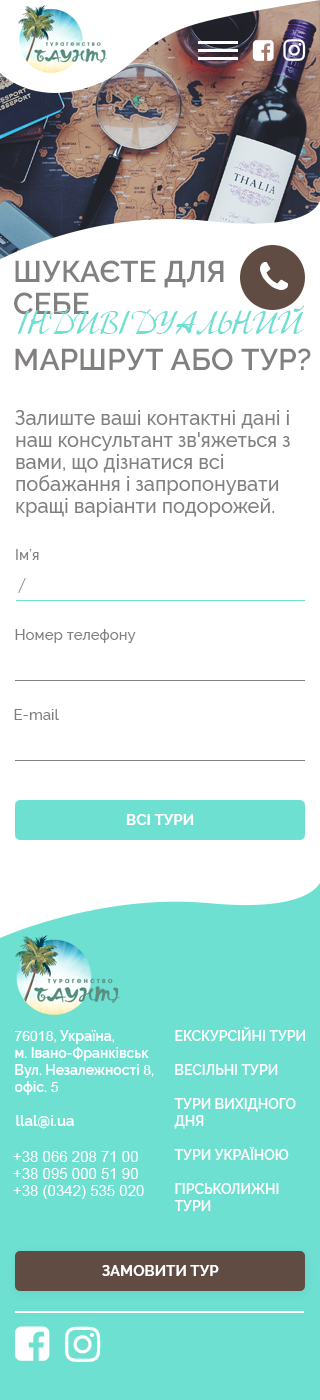
<style>
.page{position:relative;width:320px;height:1400px;background:#ffffff}
.page>*{position:absolute;margin:0}
.t1{font:30px/32px "Raleway-SemiBold";color:#82807f;text-transform:uppercase}
.t2{font:34px "Adventure";color:#6ee0d2;text-transform:uppercase}
.t3{font:30px "Raleway-SemiBold";color:#82807f;text-transform:uppercase}
.t4{font:20px/22px "Raleway-Medium";color:#82807f}
.t5{font:15px "Raleway-Medium";color:#82807f}
.t6{font:17px "Adventure";color:#82807f;text-transform:uppercase}
.t7{font:15px "Raleway-Bold";color:#ffffff}
.t8{font:14px/17px "Raleway-SemiBold";color:#ffffff}
.t9{font:14px/17px "ArialMT";color:#ffffff}
.t10{font:20px/22px "Raleway-Bold";color:#ffffff}
.t11{font:15px "Raleway-SemiBold";color:#ffffff}
.t12{font:15px/17px "ArialMT";color:#ffffff}
</style>
<div class="page">
<p class="t1" style="left:14px;top:260px;width:210px;height:55px">Шукаєте для <br>себе</p>
<p class="t2" style="left:17px;top:305px;width:288px;height:30px">iндивiдуальний</p>
<p class="t3" style="left:15px;top:348px;width:296px;height:23px">маршрут або тур?</p>
<p class="t4" style="left:15px;top:410px;width:275px;height:107px">Залиште ваші контактні дані і <br>наш консультант зв'яжеться з <br>вами, що дізнатися всі <br>побажання і запропонувати <br>кращі варіанти подорожей.</p>
<p class="t5" style="left:16px;top:549px;width:23px;height:11px">Ім’я</p>
<p class="t6" style="left:18px;top:578px;width:8px;height:15px">/</p>
<p class="t5" style="left:15px;top:629px;width:121px;height:14px">Номер телефону</p>
<p class="t5" style="left:14px;top:709px;width:45px;height:11px">E-mail</p>
<p class="t7" style="left:126px;top:814px;width:68px;height:11px">ВСІ ТУРИ</p>
<p class="t8" style="left:14px;top:1030px;width:140px;height:65px"><span class="t9">76018</span>, Україна, <br>м. Івано-Франківськ<br>Вул. Незалежності <span class="t9">8</span>, <br>офіс.<span class="t9"> 5</span></p>
<p class="t8" style="left:174px;top:1027px;width:131px;height:184px"><span class="t10"><br><br><br></span>ЕКСКУРСІЙНІ ТУРИ<br><br>ВЕСІЛЬНІ ТУРИ<br><br>ТУРИ ВИХІДНОГО <br>ДНЯ<br><br>ТУРИ УКРАЇНОЮ<br><br>ГІРСЬКОЛИЖНІ <br>ТУРИ</p>
<p class="t11" style="left:16px;top:1115px;width:58px;height:14px">llal@i.ua</p>
<p class="t12" style="left:13px;top:1151px;width:131px;height:48px">+38 066 208 71 00<br>+38 095 000 51 90<br>+38 (0342) 535 020</p>
<p class="t7" style="left:102px;top:1265px;width:117px;height:11px">ЗАМОВИТИ ТУР</p>
</div>
